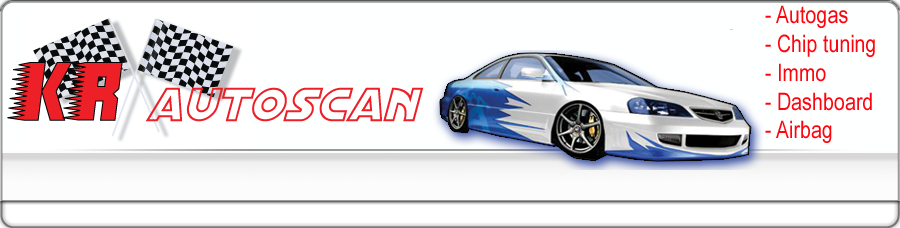
<style>
.page{position:relative;width:900px;height:228px;background:#feffff}
.page>*{position:absolute;margin:0}
.t1{font:24px "ArialNarrow";color:#ff040e}
</style>
<div class="page">
<p class="t1" style="left:765px;top:5px;width:110px;height:138px">- Autogas<br>- Chip tuning<br>- Immo<br>- Dashboard<br>- Airbag</p>
</div>
